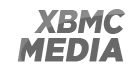
<style>
.page{position:relative;width:128px;height:64px;background:#ffffff}
.page>*{position:absolute;margin:0}
.t1{font:33px/28px "FluidTitleCaps";color:#686868;font-weight:bold;font-style:italic;scale:0.91 1}
.t2{font:33px/28px "FluidTitleCaps";letter-spacing:-0.025em;color:#686868;font-style:italic;scale:0.91 1}
</style>
<div class="page">
<p class="t1" style="left:17px;top:9px;width:109px;height:53px;text-align:right"><span class="t2">xbmc<br></span>MEDIA</p>
</div>
